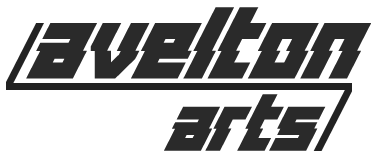
<style>
.page{position:relative;width:378px;height:159px;background:#ffffff}
.page>*{position:absolute;margin:0}
.t1{font:126.4px "Distortion-Of-The-Brain-And-Mind";color:#2a2a2a}
.t2{font:100px "Distortion-Of-The-Brain-And-Mind";color:#2a2a2a}
</style>
<div class="page">
<p class="t1" style="left:26px;top:7px;width:345px;height:72px">Avelton</p>
<p class="t2" style="left:164px;top:94px;width:162px;height:57px">arts</p>
</div>
